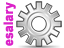
<style>
.page{position:relative;width:64px;height:48px;background:#ffffff}
.page>*{position:absolute;margin:0}
.t1{font:13px "Arial-Black";letter-spacing:-0.005em;color:#db22c8;font-weight:bold;scale:0.8 1}
</style>
<div class="page">
<p class="t1" style="left:3px;top:2px;width:13px;height:44px;rotate:-90deg">esalary</p>
</div>
